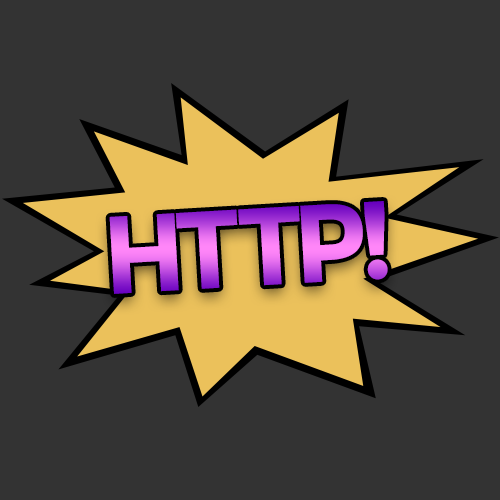
<style>
.page{position:relative;width:500px;height:500px;background:#333333}
.page>*{position:absolute;margin:0}
.t1{font:109.4px "Montserrat-Bold";letter-spacing:-0.1em;font-weight:bold}
</style>
<div class="page">
<p class="t1" style="left:109px;top:201px;width:279px;height:93px;rotate:-3deg">HTTP!</p>
</div>
